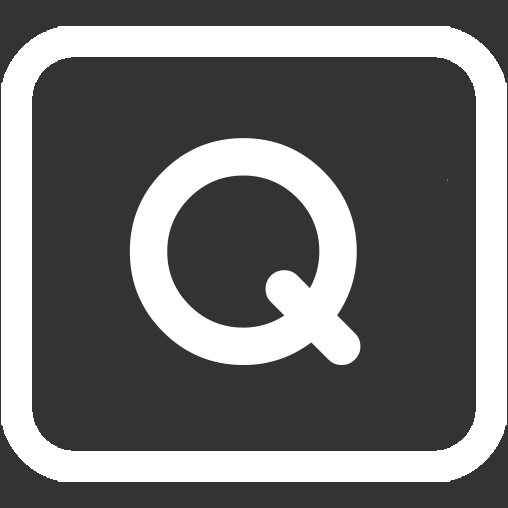
<style>
.page{position:relative;width:508px;height:508px;background:#333333}
.page>*{position:absolute;margin:0}
.t1{font:324px "Moon-Bold";color:#ffffff}
</style>
<div class="page">
<p class="t1" style="left:129px;top:138px;width:232px;height:227px">Q</p>
</div>
